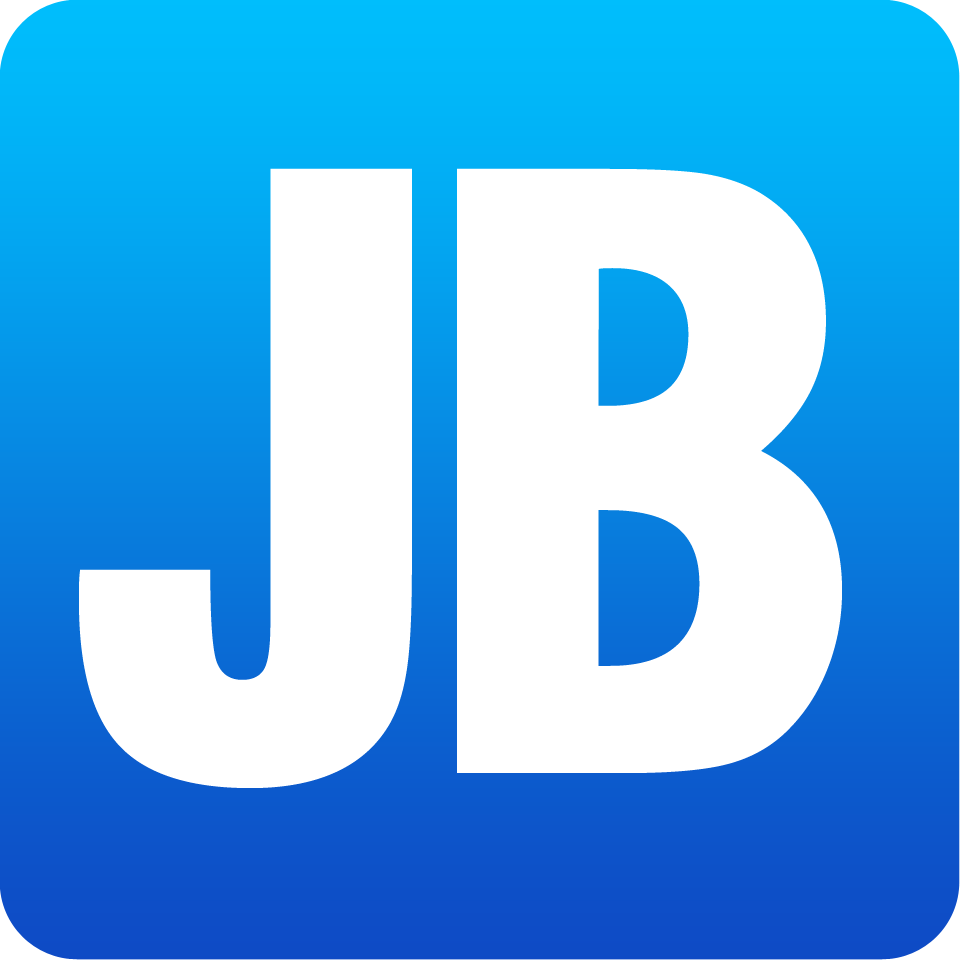
<style>
.page{position:relative;width:960px;height:960px;background:#ffffff}
.page>*{position:absolute;margin:0}
.t1{font:803.5px "Swiss721BT-BlackCondensed";letter-spacing:0.03em;color:#ffffff}
</style>
<div class="page">
<p class="t1" style="left:79px;top:168px;width:333px;height:620px">J</p>
<p class="t1" style="left:457px;top:168px;width:385px;height:605px">B</p>
</div>
